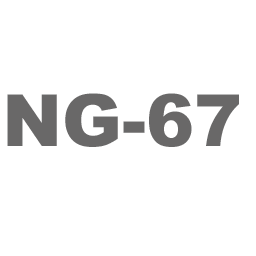
<style>
.page{position:relative;width:256px;height:256px;background:#ffffff}
.page>*{position:absolute;margin:0}
.t1{font:72px "Arial-Black";color:#696868}
</style>
<div class="page">
<p class="t1" style="left:7px;top:93px;width:232px;height:54px">NG-67</p>
</div>
